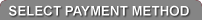
<style>
.page{position:relative;width:202px;height:20px;background:#858585}
.page>*{position:absolute;margin:0}
.t1{font:13.3px "Arial-BoldMT";color:#ffffff}
</style>
<div class="page">
<p class="t1" style="left:9px;top:5px;width:180px;height:11px">SELECT PAYMENT METHOD</p>
</div>
